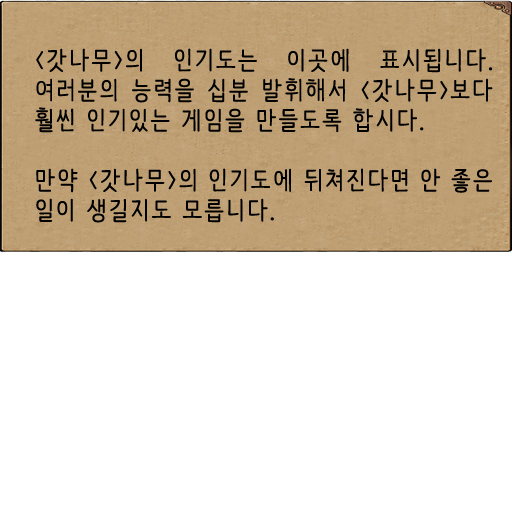
<style>
.page{position:relative;width:512px;height:512px;background:#ffffff}
.page>*{position:absolute;margin:0}
.t1{font:25px "NanumBarunpen";letter-spacing:0.075em;color:#000000;font-weight:bold}
</style>
<div class="page">
<p class="t1" style="left:35px;top:48px;width:458px;height:175px;text-align:justify">&lt;갓나무&gt;의 인기도는 이곳에 표시됩니다. 여러분의 능력을 십분 발휘해서 &lt;갓나무&gt;보다 훨씬 인기있는 게임을 만들도록 합시다.<br><br>만약 &lt;갓나무&gt;의 인기도에 뒤쳐진다면 안 좋은 일이 생길지도 모릅니다.</p>
</div>
